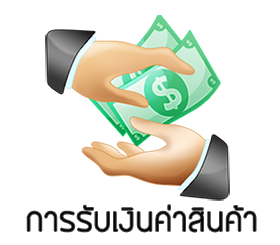
<style>
.page{position:relative;width:280px;height:245px;background:#ffffff}
.page>*{position:absolute;margin:0}
.t1{font:30px "BangnaNew";color:#020200}
</style>
<div class="page">
<p class="t1" style="left:27px;top:205px;width:229px;height:27px">การรับเงินค่าสินค้า</p>
</div>
